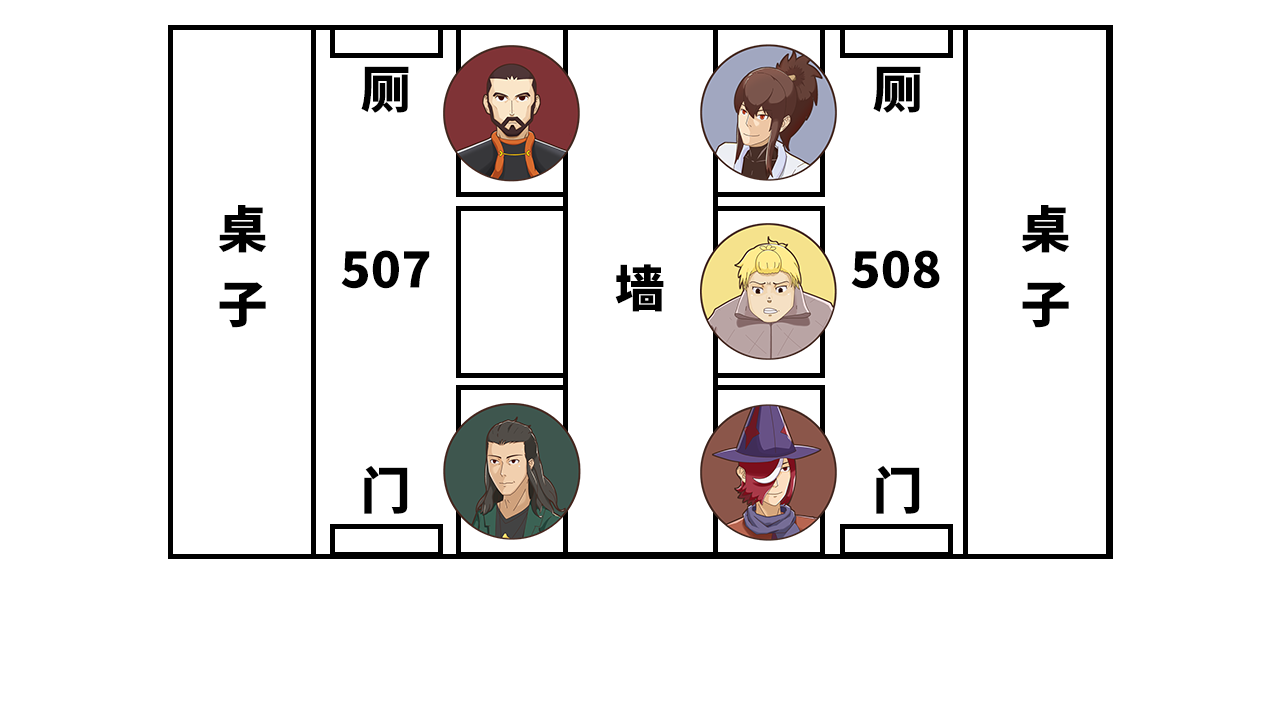
<style>
.page{position:relative;width:1280px;height:720px;background:#ffffff}
.page>*{position:absolute;margin:0}
.t1{font:12px "SourceHanSansCN-Heavy";color:#000000}
.t2{font:50px "SourceHanSansCN-Heavy";color:#000000}
</style>
<div class="page">
<p class="t1" style="left:361px;top:66px;width:48px;height:47px">厕</p>
<p class="t1" style="left:873px;top:66px;width:48px;height:47px">厕</p>
<p class="t1" style="left:218px;top:205px;width:49px;height:123px">桌子</p>
<p class="t1" style="left:1021px;top:205px;width:49px;height:123px">桌子</p>
<p class="t2" style="left:341px;top:250px;width:89px;height:39px">507</p>
<p class="t2" style="left:851px;top:250px;width:89px;height:39px">508</p>
<p class="t1" style="left:615px;top:264px;width:49px;height:48px">墙</p>
<p class="t1" style="left:364px;top:465px;width:44px;height:49px">门</p>
<p class="t1" style="left:876px;top:465px;width:44px;height:49px">门</p>
</div>
